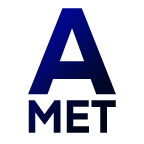
<style>
.page{position:relative;width:144px;height:144px;background:#ffffff}
.page>*{position:absolute;margin:0}
.t1{font:122.5px "Nexa-Heavy";scale:0.89 1}
.t2{font:46.4px "Nexa-Heavy";scale:0.89 1}
</style>
<div class="page">
<p class="t1" style="left:28px;top:8px;width:88px;height:87px">A</p>
<p class="t2" style="left:28px;top:100px;width:88px;height:33px">MET</p>
</div>
